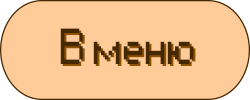
<style>
.page{position:relative;width:250px;height:100px;background:#ffcc99}
.page>*{position:absolute;margin:0}
.t1{font:47.3px "Small Fonts";color:#462800}
.t2{font:47.3px "Small Fonts"}
</style>
<div class="page">
<p class="t1" style="left:60px;top:28px;width:134px;height:36px">В меню</p>
<p class="t2" style="left:62px;top:30px;width:134px;height:36px">В меню</p>
</div>
